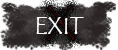
<style>
.page{position:relative;width:118px;height:50px}
.page>*{position:absolute;margin:0}
.t1{font:24px "TempusSansITC";color:#fdfdfd}
</style>
<div class="page">
<p class="t1" style="left:36px;top:17px;width:48px;height:17px">EXIT</p>
</div>
